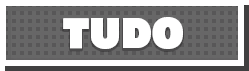
<style>
.page{position:relative;width:249px;height:71px}
.page>*{position:absolute;margin:0}
.t1{font:36px "RaglanPunchStd-UB";color:#ffffff}
</style>
<div class="page">
<p class="t1" style="left:63px;top:17px;width:120px;height:32px">TUDO</p>
</div>
